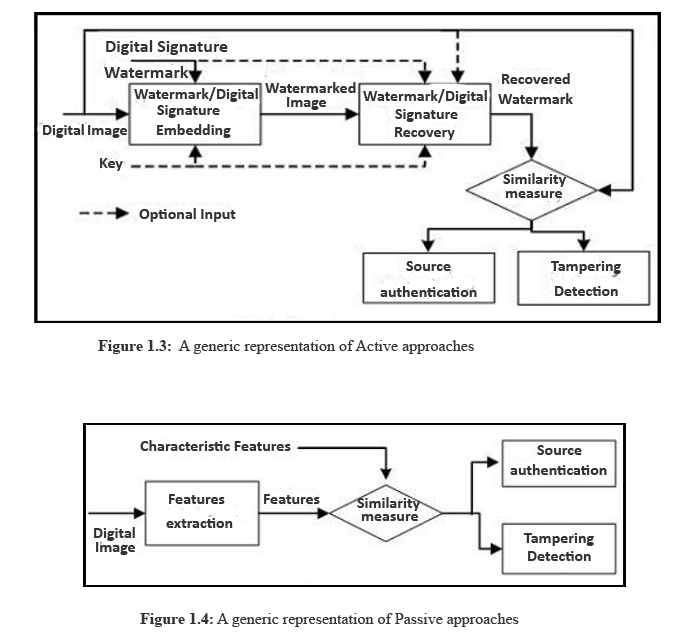
<style>
.page{position:relative;width:700px;height:640px;background:#ffffff}
.page>*{position:absolute;margin:0}
.t1{font:18px "Calibri-Bold";color:#333333}
.t2{font:16px "Calibri-Bold";color:#333333}
.t3{font:16px "TimesNewRomanPSMT";color:#333333}
.t4{font:16px "TimesNewRomanPS-BoldMT";color:#333333}
</style>
<div class="page">
<p class="t1" style="left:104px;top:66px;width:85px;height:12px">Watermark</p>
<p class="t2" style="left:502px;top:73px;width:68px;height:11px">Recovered</p>
<p class="t2" style="left:134px;top:87px;width:124px;height:15px">Watermark/Digital</p>
<p class="t2" style="left:265px;top:82px;width:91px;height:11px">Watermarked</p>
<p class="t2" style="left:363px;top:89px;width:124px;height:15px">Watermark/Digital</p>
<p class="t2" style="left:287px;top:97px;width:39px;height:13px">Image</p>
<p class="t2" style="left:498px;top:93px;width:75px;height:11px">Watermark</p>
<p class="t2" style="left:157px;top:105px;width:63px;height:13px">Signature</p>
<p class="t2" style="left:395px;top:109px;width:63px;height:13px">Signature</p>
<p class="t2" style="left:43px;top:124px;width:41px;height:14px">Digital</p>
<p class="t2" style="left:88px;top:125px;width:39px;height:13px">Image</p>
<p class="t2" style="left:395px;top:127px;width:60px;height:13px">Recovery</p>
<p class="t2" style="left:100px;top:158px;width:23px;height:13px">Key</p>
<p class="t2" style="left:503px;top:173px;width:63px;height:14px">Similarity</p>
<p class="t2" style="left:505px;top:191px;width:57px;height:7px">measure</p>
<p class="t2" style="left:139px;top:208px;width:97px;height:14px">Optional Input</p>
<p class="t2" style="left:406px;top:261px;width:45px;height:10px">Source</p>
<p class="t2" style="left:551px;top:261px;width:70px;height:13px">Tampering</p>
<p class="t2" style="left:380px;top:286px;width:97px;height:11px">authentication</p>
<p class="t2" style="left:555px;top:286px;width:63px;height:10px">Detection</p>
<p class="t3" style="left:98px;top:340px;width:376px;height:14px"><span class="t4">Figure 1.3</span><span class="t2">:  </span>A generic representation of Active approaches</p>
<p class="t2" style="left:140px;top:440px;width:151px;height:11px">Characteristic Features</p>
<p class="t2" style="left:537px;top:445px;width:45px;height:10px">Source</p>
<p class="t2" style="left:510px;top:464px;width:97px;height:11px">authentication</p>
<p class="t2" style="left:169px;top:494px;width:56px;height:10px">Features</p>
<p class="t2" style="left:264px;top:494px;width:56px;height:10px">Features</p>
<p class="t2" style="left:357px;top:497px;width:63px;height:14px">Similarity</p>
<p class="t2" style="left:166px;top:518px;width:67px;height:10px">extraction</p>
<p class="t2" style="left:361px;top:514px;width:57px;height:7px">measure</p>
<p class="t2" style="left:94px;top:527px;width:41px;height:14px">Digital</p>
<p class="t2" style="left:524px;top:533px;width:70px;height:13px">Tampering</p>
<p class="t2" style="left:96px;top:542px;width:39px;height:13px">Image</p>
<p class="t2" style="left:528px;top:551px;width:63px;height:10px">Detection</p>
<p class="t3" style="left:140px;top:613px;width:379px;height:14px"><span class="t4">Figure 1.4</span><span class="t2">: </span>A generic representation of Passive approaches</p>
</div>
